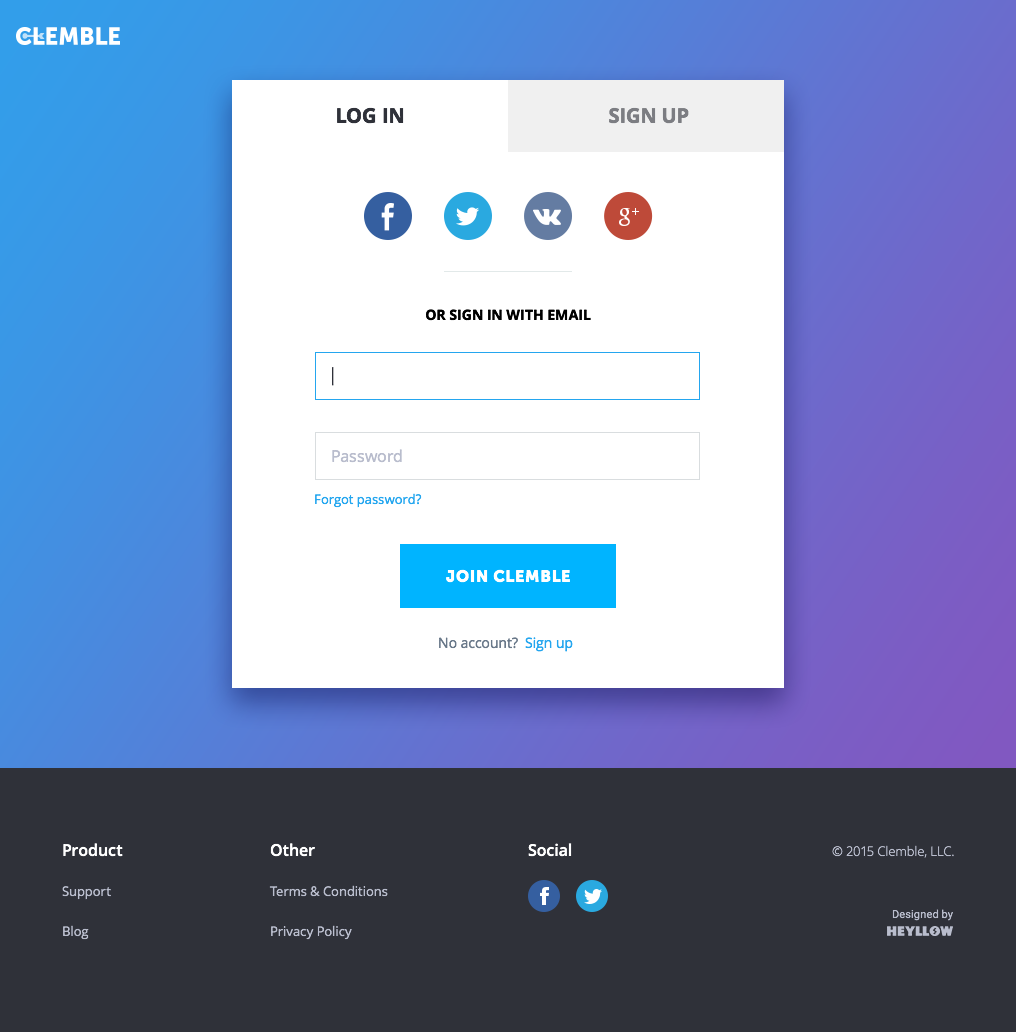
<style>
.page{position:relative;width:1016px;height:1032px;background:#ffffff}
.page>*{position:absolute;margin:0}
.t1{font:20px "OpenSans-Bold";color:#2f3139;text-transform:uppercase}
.t2{font:20px "OpenSans-Bold";color:#7c7d82;text-transform:uppercase}
.t3{font:14px "OpenSans-Bold";color:#000000;text-transform:uppercase}
.t4{font:18px "OpenSans-Light";color:#2f3139}
.t5{font:16px "OpenSans";color:#b9bdcd}
.t6{font:13px "OpenSans";color:#24a6ef}
.t7{font:16px "MuseoSans-900";letter-spacing:0.05em;color:#ffffff;text-transform:uppercase}
.t8{font:14px "OpenSans";color:#697889}
.t9{font:14px "OpenSans";color:#24a6ef}
.t10{font:16px "OpenSans-Semibold";color:#ffffff}
.t11{font:13px "OpenSans-Light";color:#b9bdcd}
.t12{font:13px/40px "OpenSans";color:#b9bdcd}
.t13{font:11px "Roboto-Regular";letter-spacing:0.01em;color:#b9bdcd}
</style>
<div class="page">
<p class="t1" style="left:337px;top:107px;width:67px;height:17px">Log in</p>
<p class="t2" style="left:609px;top:107px;width:80px;height:17px">Sign up</p>
<p class="t3" style="left:426px;top:309px;width:165px;height:12px">OR sign in with email</p>
<p class="t4" style="left:332px;top:367px;width:2px;height:19px">|</p>
<p class="t5" style="left:332px;top:449px;width:70px;height:14px">Password</p>
<p class="t6" style="left:315px;top:493px;width:107px;height:15px">Forgot password?</p>
<p class="t7" style="left:446px;top:569px;width:124px;height:14px">Join CLemble</p>
<p class="t8" style="left:439px;top:637px;width:134px;height:15px">No account?  <span class="t9">Sign up</span></p>
<p class="t10" style="left:63px;top:843px;width:60px;height:14px">Product</p>
<p class="t10" style="left:270px;top:843px;width:45px;height:14px">Other</p>
<p class="t10" style="left:528px;top:843px;width:44px;height:14px">Social</p>
<p class="t11" style="left:832px;top:845px;width:122px;height:13px">© 2015 Clemble, LLC.</p>
<p class="t12" style="left:62px;top:886px;width:49px;height:54px">Support<br>Blog</p>
<p class="t12" style="left:269px;top:885px;width:119px;height:55px">Terms &amp; Conditions<br>Privacy Policy</p>
<p class="t13" style="left:892px;top:909px;width:61px;height:12px">Designed by</p>
</div>
